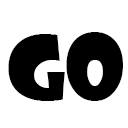
<style>
.page{position:relative;width:128px;height:128px;background:#ffffff}
.page>*{position:absolute;margin:0}
.t1{font:86px "ShowcardGothic-Reg";color:#000000}
</style>
<div class="page">
<p class="t1" style="left:8px;top:32px;width:115px;height:69px">GO</p>
</div>
